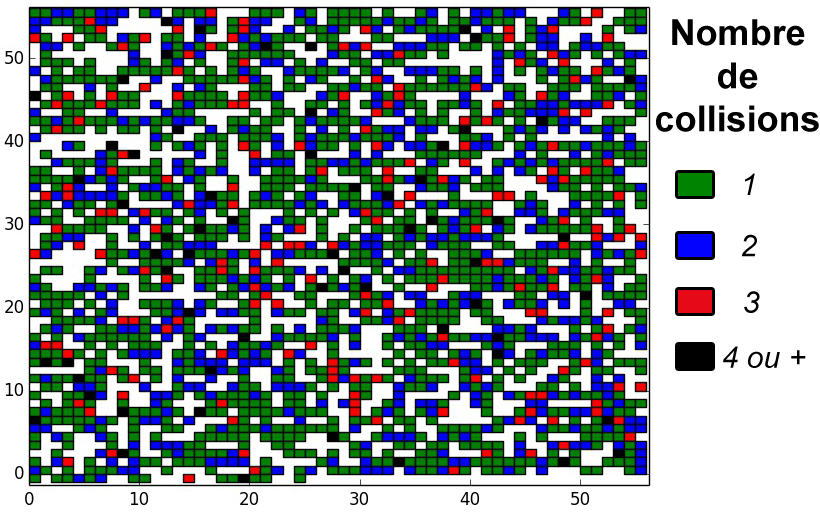
<style>
.page{position:relative;width:820px;height:514px;background:#ffffff}
.page>*{position:absolute;margin:0}
.t1{font:36px "Arial-BoldMT";color:#000000}
.t2{font:30px "Arial-ItalicMT";color:#000000}
</style>
<div class="page">
<p class="t1" style="left:656px;top:19px;width:163px;height:113px;text-align:center">Nombre<br>de<br>collisions</p>
<p class="t2" style="left:744px;top:173px;width:11px;height:22px">1</p>
<p class="t2" style="left:741px;top:234px;width:16px;height:23px">2</p>
<p class="t2" style="left:744px;top:291px;width:16px;height:22px">3</p>
<p class="t2" style="left:723px;top:346px;width:83px;height:22px">4 ou +</p>
</div>
